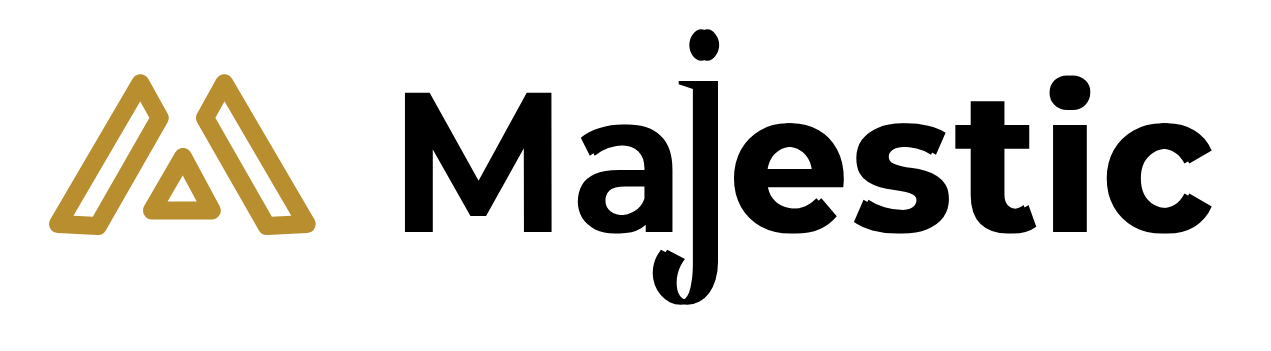
<style>
.page{position:relative;width:1271px;height:351px;background:#ffffff}
.page>*{position:absolute;margin:0}
.t1{font:315px "Oranienbaum-Regular";color:#000000;font-weight:bold;scale:0.75 1}
.t2{font:199px "Montserrat-Bold";color:#000000;font-weight:bold;scale:0.93 1}
.t3{font:199px "Montserrat-SemiBold";color:#000000;font-weight:bold;scale:0.93 1}
</style>
<div class="page">
<p class="t1" style="left:652px;top:29px;width:68px;height:276px">j</p>
<p class="t2" style="left:733px;top:75px;width:479px;height:159px">estic</p>
<p class="t3" style="left:404px;top:92px;width:269px;height:142px">Ma</p>
</div>
